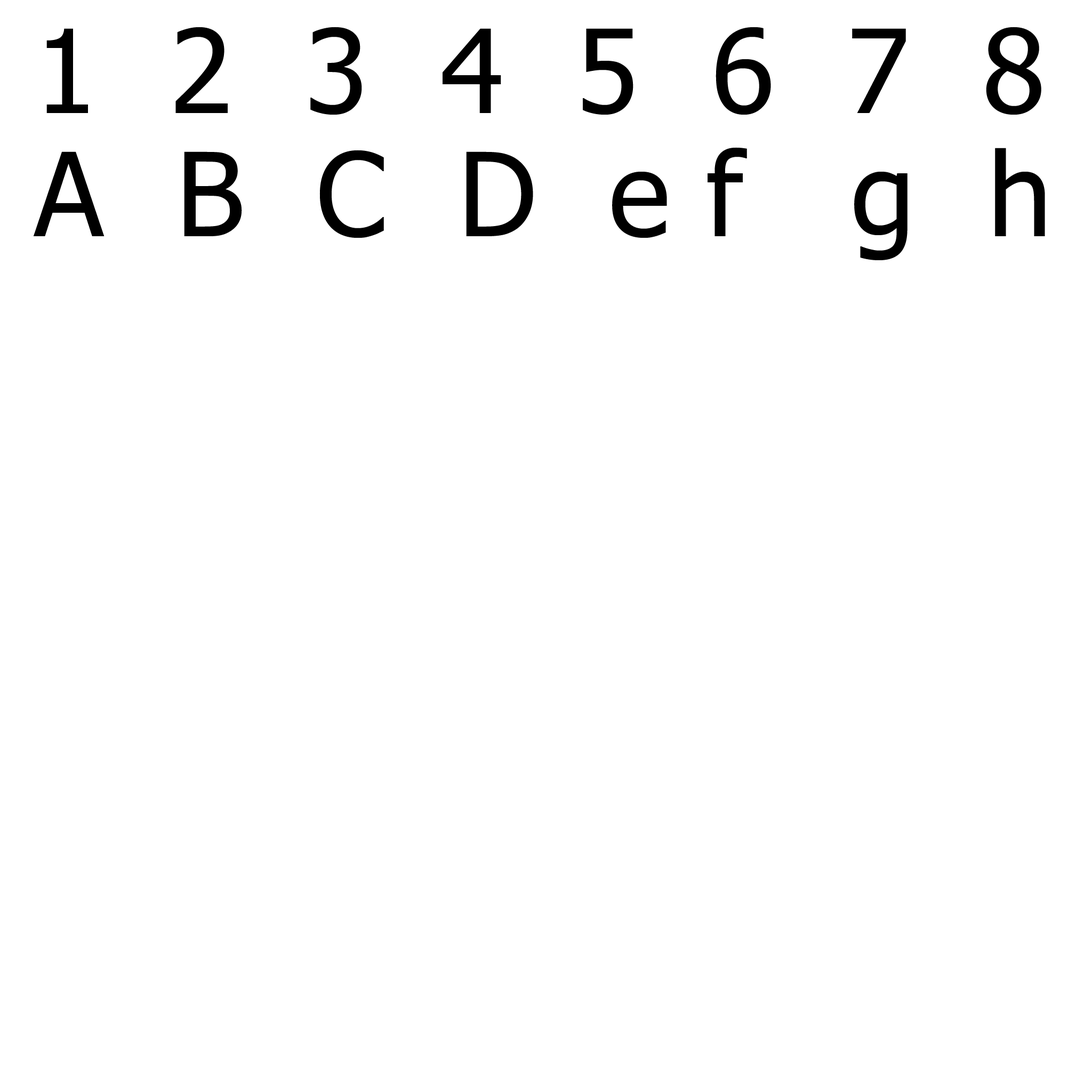
<style>
.page{position:relative;width:1092px;height:1092px;background:#ffffff}
.page>*{position:absolute;margin:0}
.t1{font:115.7px "Tahoma";color:#000000}
</style>
<div class="page">
<p class="t1" style="left:46px;top:27px;width:995px;height:88px">1  2  3  4  5  6  7  8</p>
<p class="t1" style="left:33px;top:147px;width:1012px;height:113px">A  B  C  D  e f   g  h</p>
</div>
